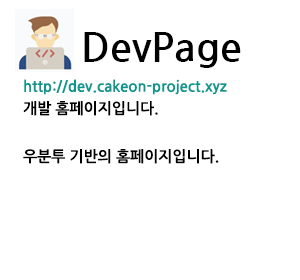
<style>
.page{position:relative;width:300px;height:280px;background:#ffffff}
.page>*{position:absolute;margin:0}
.t1{font:40px "NanumGothicBold";color:#000000}
.t2{font:15px "NanumGothicBold";color:#0a978f}
.t3{font:15px "NanumGothicBold";color:#000000}
</style>
<div class="page">
<p class="t1" style="left:84px;top:32px;width:157px;height:36px">DevPage</p>
<p class="t2" style="left:24px;top:79px;width:203px;height:16px">http://dev.cakeon-project.xyz</p>
<p class="t3" style="left:23px;top:101px;width:135px;height:15px">개발 홈페이지입니다.</p>
<p class="t3" style="left:23px;top:149px;width:196px;height:15px">우분투 기반의 홈페이지입니다.</p>
</div>
